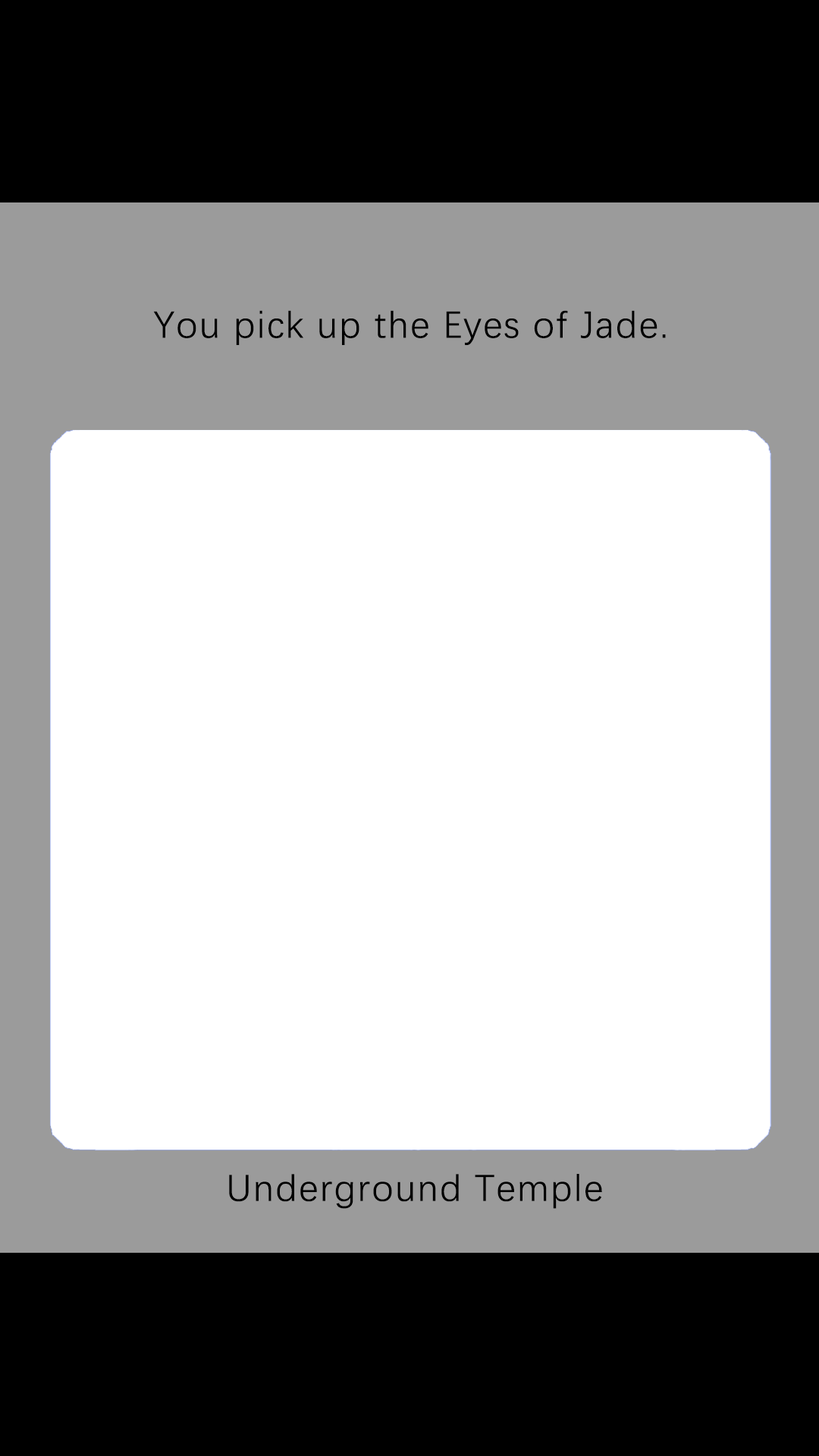
<style>
.page{position:relative;width:819px;height:1456px;background:#ffffff}
.page>*{position:absolute;margin:0}
.t1{font:37.9px "DengXian-Regular";letter-spacing:0.04em;color:#000000}
</style>
<div class="page">
<p class="t1" style="left:153px;top:310px;width:513px;height:35px">You pick up the Eyes of Jade.</p>
<p class="t1" style="left:229px;top:1174px;width:373px;height:35px">Underground Temple</p>
</div>
